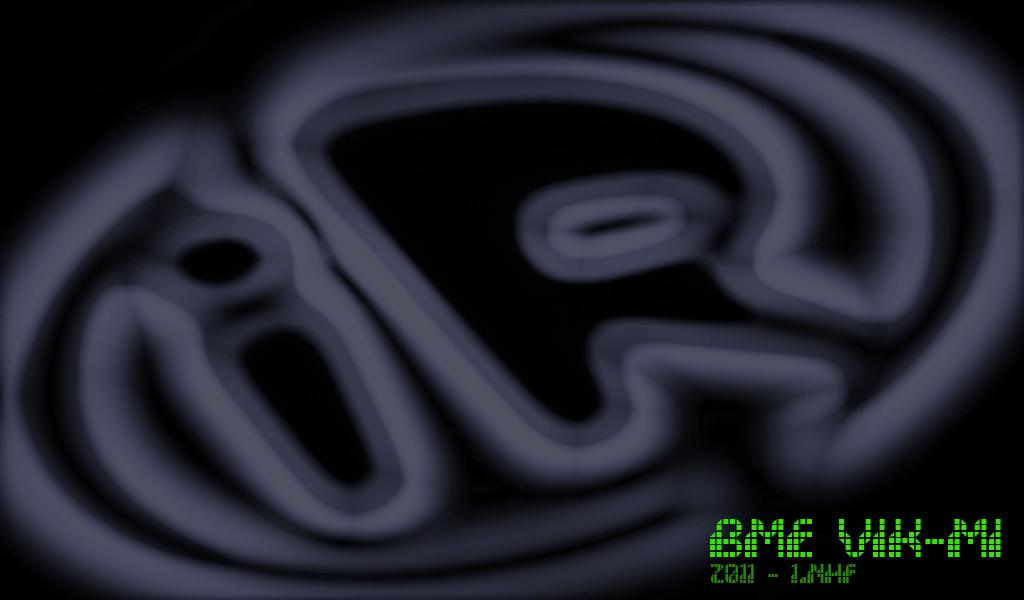
<style>
.page{position:relative;width:1024px;height:600px}
.page>*{position:absolute;margin:0}
.t1{font:48px "Wargames";color:#35e300}
.t2{font:24px "Wargames";color:#27830b}
</style>
<div class="page">
<p class="t1" style="left:710px;top:519px;width:291px;height:38px">BME VIK-MI</p>
<p class="t2" style="left:710px;top:564px;width:146px;height:19px">2011 - 1.NHF</p>
</div>
